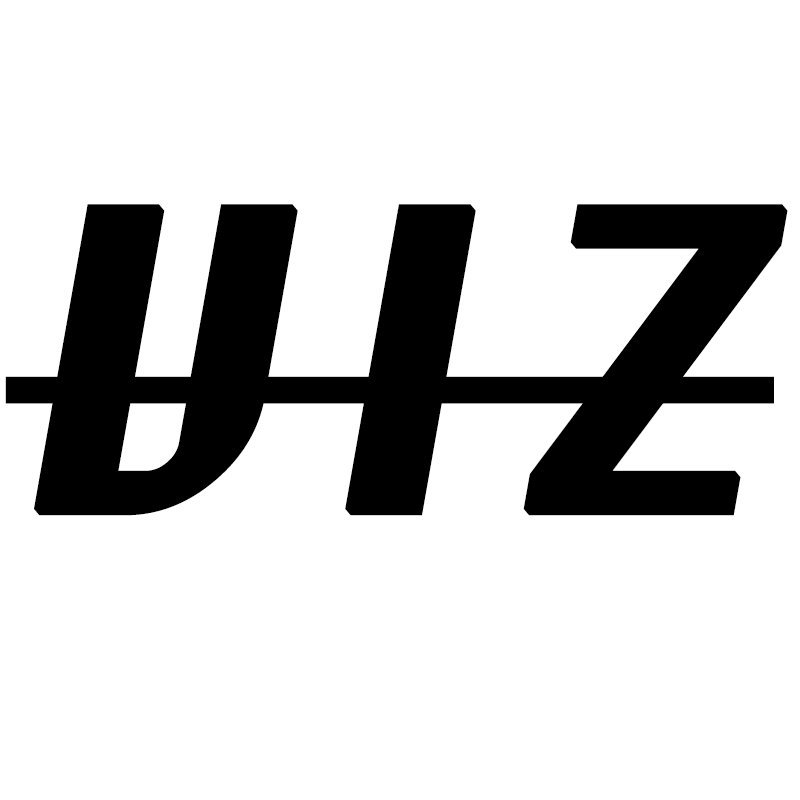
<style>
.page{position:relative;width:800px;height:800px;background:#ffffff}
.page>*{position:absolute;margin:0}
.t1{font:400px "Krungthep";color:#000000;font-weight:bold;font-style:italic}
</style>
<div class="page">
<p class="t1" style="left:5px;top:204px;width:783px;height:312px">VIZ</p>
</div>
